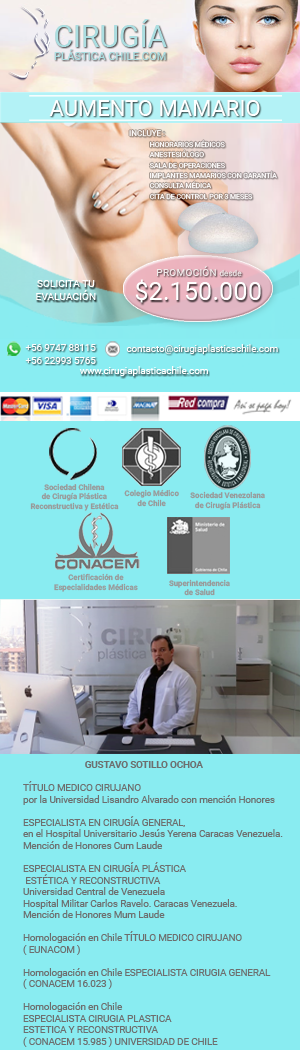
<style>
.page{position:relative;width:300px;height:1050px;background:#89ecf1}
.page>*{position:absolute;margin:0}
.t1{font:11.2px "Roboto-Regular";color:#abdee1}
.t2{font:30px "Roboto-Regular";color:#abdee1}
.t3{font:22px "Roboto-Regular";color:#ffffff}
.t4{font:10.4px "Roboto-Regular";color:#f0eaea}
.t5{font:8.1px "Roboto-Regular";color:#f0eaea}
.t6{font:10.4px "Roboto-Regular";letter-spacing:-0.01em;color:#ffffff}
.t7{font:25.5px "Roboto-Regular";color:#ffffff}
.t8{font:9.7px/12.4px "Roboto-Regular";color:#fcfcfc}
.t9{font:9.7px "Roboto-Regular";color:#fcfcfc}
.t10{font:9.7px "Roboto-Regular";color:#ffffff}
.t11{font:7.7px "Roboto-Bold";color:#999999}
.t12{font:9.6px "Roboto-Regular";color:#6d6f6f}
.t13{font:9.6px "Roboto-Bold";color:#6d6f6f}
</style>
<div class="page">
<p class="t1" style="left:54px;top:19px;width:113px;height:41px;text-align:center"><span class="t2">CIRUGÍA<br></span>PLÁSTICA CHILE.COM</p>
<p class="t3" style="left:49px;top:100px;width:211px;height:16px">AUMENTO MAMARIO</p>
<p class="t4" style="left:157px;top:266px;width:85px;height:11px">PROMOCIÓN <span class="t5">desde</span></p>
<p class="t6" style="left:36px;top:280px;width:60px;height:20px;text-align:center">SOLICITA TU<br>EVALUACIÓN</p>
<p class="t7" style="left:135px;top:279px;width:126px;height:24px">$2.150.000</p>
<p class="t8" style="left:25px;top:344px;width:71px;height:20px">+56 9747 88115<br>+56 22993 5765</p>
<p class="t9" style="left:126px;top:344px;width:152px;height:11px">contacto@cirugiaplasticachile.com</p>
<p class="t10" style="left:79px;top:366px;width:129px;height:10px">www.cirugiaplasticachile.com</p>
<p class="t11" style="left:30px;top:483px;width:89px;height:28px;text-align:center">Sociedad Chilena<br>de Cirugía Plástica<br>Reconstructiva y Estética</p>
<p class="t11" style="left:124px;top:489px;width:55px;height:18px;text-align:center">Colegio Médico<br>de Chile</p>
<p class="t11" style="left:190px;top:491px;width:75px;height:19px;text-align:center">Sociedad Venezolana<br>de Cirugía Plástica</p>
<p class="t11" style="left:54px;top:573px;width:84px;height:19px;text-align:center">Certificación de<br>Especialidades Médicas</p>
<p class="t11" style="left:169px;top:579px;width:61px;height:17px;text-align:center">Superintendencia<br>de Salud</p>
<p class="t12" style="left:23px;top:761px;width:260px;height:286px"><span class="t13">GUSTAVO SOTILLO OCHOA<br></span><br>TÍTULO MEDICO CIRUJANO<br>por la Universidad Lisandro Alvarado con mención Honores<br><br>ESPECIALISTA EN CIRUGÍA GENERAL, <br>en el Hospital Universitario Jesús Yerena Caracas Venezuela. <br>Mención de Honores Cum Laude<br><br>ESPECIALISTA EN CIRUGÍA PLÁSTICA<br> ESTÉTICA Y RECONSTRUCTIVA <br>Universidad Central de Venezuela <br>Hospital Militar Carlos Ravelo. Caracas Venezuela. <br>Mención de Honores Mum Laude<br><br>Homologación en Chile TÍTULO MEDICO CIRUJANO <br>( EUNACOM )<br><br>Homologación en Chile ESPECIALISTA CIRUGIA GENERAL<br>( CONACEM 16.023 )<br><br>Homologación en Chile <br>ESPECIALISTA CIRUGIA PLASTICA <br>ESTETICA Y RECONSTRUCTIVA <br>( CONACEM 15.985 ) UNIVERSIDAD DE CHILE</p>
</div>
